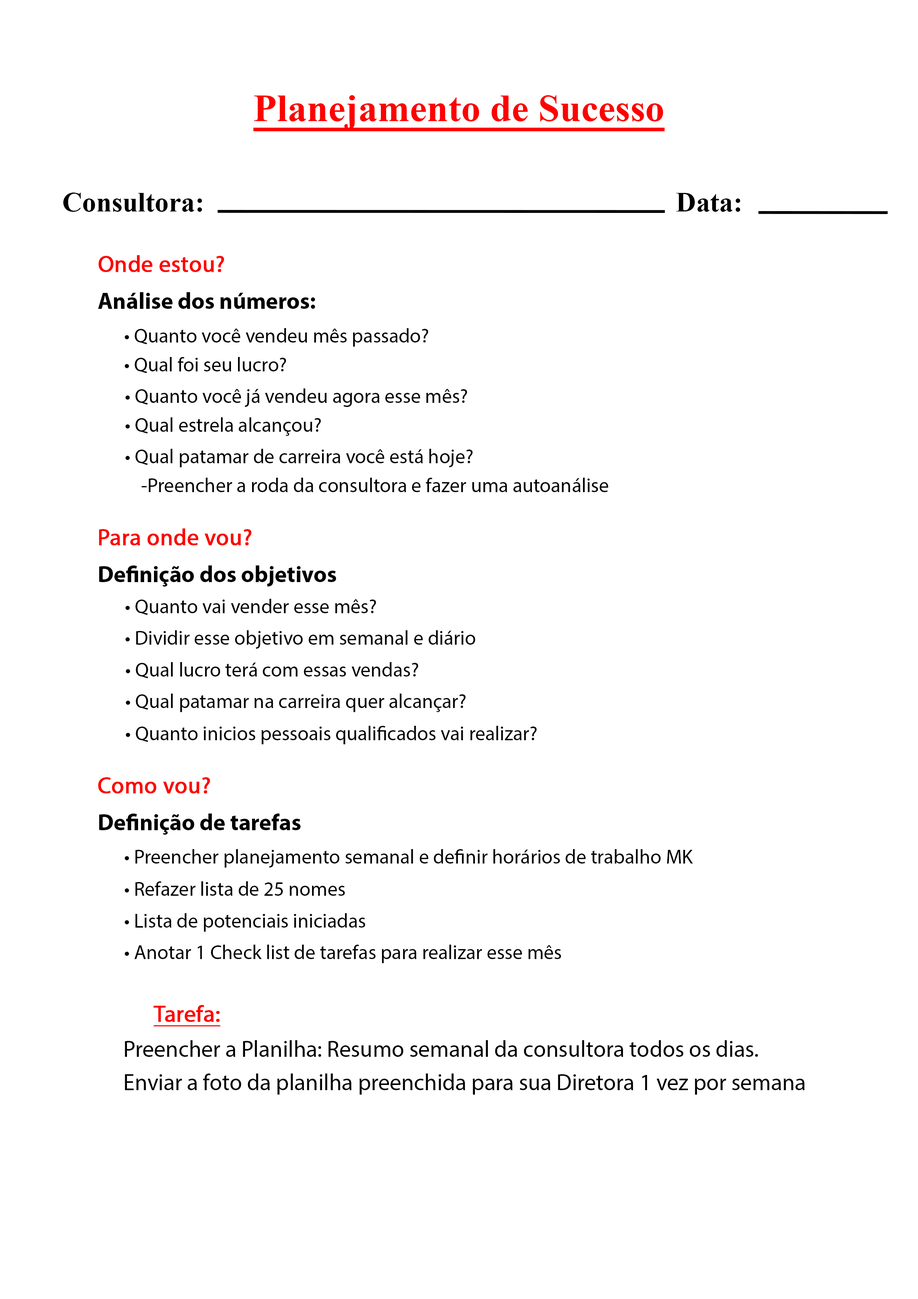
<style>
.page{position:relative;width:918px;height:1299px;background:#ffffff}
.page>*{position:absolute;margin:0}
.t1{font:38.6px "TimesNewRomanPS-BoldMT";color:#ff0000;text-decoration:underline}
.t2{font:27.8px "TimesNewRomanPS-BoldMT";color:#000000}
.t3{font:23px "MyriadPro-Regular";color:#ff0000;font-weight:bold}
.t4{font:23px "MyriadPro-Bold";color:#000000}
.t5{font:20.1px "MyriadPro-Regular";color:#000000}
.t6{font:23px "MyriadPro-Regular";color:#ff0000;font-weight:bold;text-decoration:underline}
.t7{font:23px "MyriadPro-Regular";color:#000000}
</style>
<div class="page">
<p class="t1" style="left:253px;top:95px;width:412px;height:36px">Planejamento de Sucesso</p>
<p class="t2" style="left:63px;top:193px;width:139px;height:19px">Consultora:</p>
<p class="t2" style="left:676px;top:193px;width:64px;height:19px">Data:</p>
<p class="t3" style="left:98px;top:255px;width:126px;height:17px">Onde estou?</p>
<p class="t4" style="left:98px;top:292px;width:217px;height:17px">Análise dos números:</p>
<p class="t5" style="left:125px;top:328px;width:303px;height:19px">• Quanto você vendeu mês passado?</p>
<p class="t5" style="left:125px;top:357px;width:161px;height:16px">• Qual foi seu lucro?</p>
<p class="t5" style="left:126px;top:388px;width:341px;height:19px">• Quanto você já vendeu agora esse mês?</p>
<p class="t5" style="left:126px;top:417px;width:195px;height:19px">• Qual estrela alcançou?</p>
<p class="t5" style="left:126px;top:449px;width:347px;height:18px">• Qual patamar de carreira você está hoje?</p>
<p class="t5" style="left:141px;top:478px;width:467px;height:14px">-Preencher a roda da consultora e fazer uma autoanálise</p>
<p class="t3" style="left:99px;top:528px;width:153px;height:17px">Para onde vou?</p>
<p class="t4" style="left:99px;top:565px;width:237px;height:21px">Definição dos objetivos</p>
<p class="t5" style="left:126px;top:599px;width:250px;height:16px">• Quanto vai vender esse mês?</p>
<p class="t5" style="left:126px;top:630px;width:349px;height:19px">• Dividir esse objetivo em semanal e diário</p>
<p class="t5" style="left:126px;top:662px;width:292px;height:16px">• Qual lucro terá com essas vendas?</p>
<p class="t5" style="left:126px;top:693px;width:340px;height:19px">• Qual patamar na carreira quer alcançar?</p>
<p class="t5" style="left:126px;top:726px;width:411px;height:18px">• Quanto inicios pessoais qualificados vai realizar?</p>
<p class="t3" style="left:98px;top:777px;width:112px;height:16px">Como vou?</p>
<p class="t4" style="left:99px;top:813px;width:202px;height:21px">Definição de tarefas</p>
<p class="t5" style="left:125px;top:849px;width:568px;height:18px">• Preencher planejamento semanal e definir horários de trabalho MK</p>
<p class="t5" style="left:125px;top:881px;width:220px;height:15px">• Refazer lista de 25 nomes</p>
<p class="t5" style="left:125px;top:913px;width:240px;height:18px">• Lista de potenciais iniciadas</p>
<p class="t5" style="left:125px;top:944px;width:436px;height:19px">• Anotar 1 Check list de tarefas para realizar esse mês</p>
<p class="t6" style="left:153px;top:1005px;width:68px;height:21px">Tarefa:</p>
<p class="t7" style="left:125px;top:1040px;width:680px;height:54px">Preencher a Planilha: Resumo semanal da consultora todos os dias.<br>Enviar a foto da planilha preenchida para sua Diretora 1 vez por semana</p>
</div>
